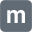
<style>
.page{position:relative;width:32px;height:32px;background:#616b75}
.page>*{position:absolute;margin:0}
.t1{font:23.5px "Helvetica-Bold";color:#ffffff}
</style>
<div class="page">
<p class="t1" style="left:7px;top:10px;width:18px;height:13px">m</p>
</div>
